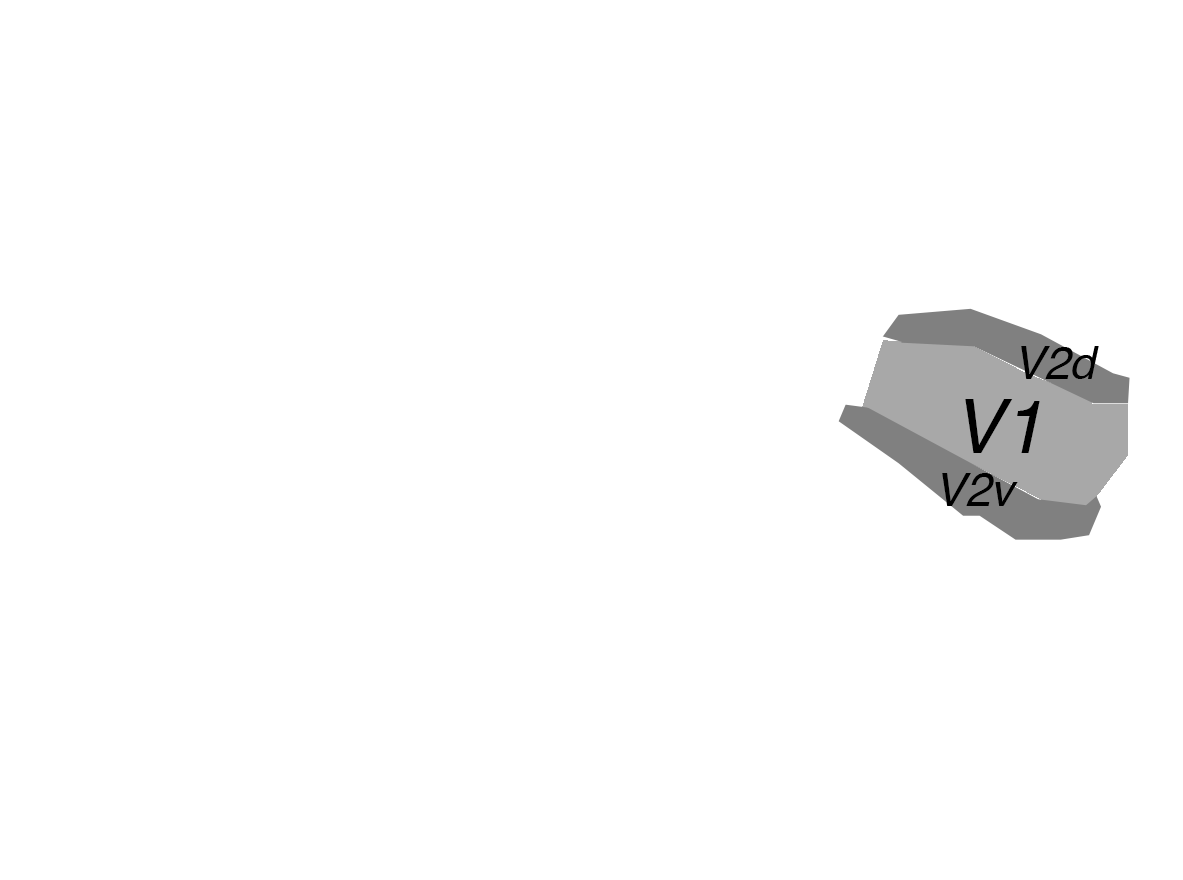
<style>
.page{position:relative;width:1183px;height:880px;background:#ffffff}
.page>*{position:absolute;margin:0}
.t1{font:45.5px "Helvetica-Oblique";color:#000000}
.t2{font:74.8px "Helvetica-Oblique";color:#000000}
.t3{font:46.3px "Helvetica-Oblique";color:#000000}
</style>
<div class="page">
<p class="t1" style="left:1021px;top:346px;width:78px;height:33px">V2d</p>
<p class="t2" style="left:965px;top:399px;width:75px;height:54px">V1</p>
<p class="t3" style="left:942px;top:473px;width:76px;height:33px">V2v</p>
</div>
